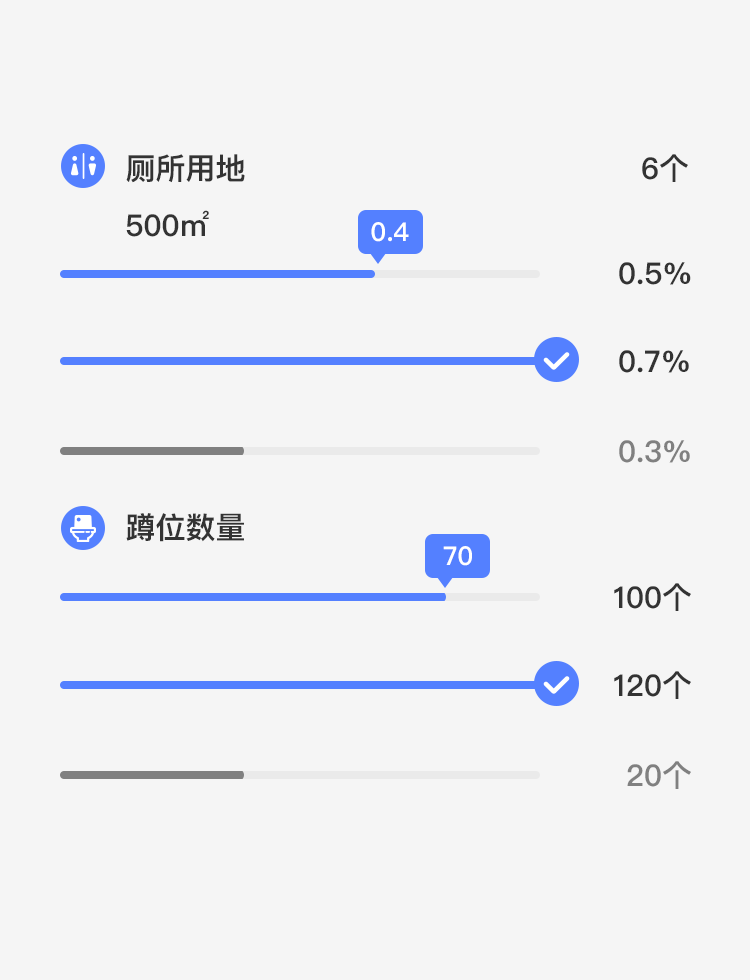
<style>
.page{position:relative;width:750px;height:980px;background:#f5f5f5}
.page>*{position:absolute;margin:0}
.t1{font:30px "PingFangSC-Semibold";color:#333333;text-transform:uppercase}
.t2{font:26px "PingFangSC-Semibold";color:#ffffff;text-transform:uppercase}
.t3{font:30px "PingFangSC-Semibold";color:#808080;text-transform:uppercase}
</style>
<div class="page">
<p class="t1" style="left:126px;top:154px;width:119px;height:29px">厕所用地</p>
<p class="t1" style="left:642px;top:154px;width:46px;height:28px">6个</p>
<p class="t1" style="left:126px;top:210px;width:83px;height:27px">500㎡</p>
<p class="t2" style="left:371px;top:222px;width:38px;height:20px">0.4</p>
<p class="t1" style="left:619px;top:262px;width:72px;height:23px">0.5%</p>
<p class="t1" style="left:619px;top:350px;width:70px;height:23px">0.7%</p>
<p class="t3" style="left:619px;top:440px;width:71px;height:23px">0.3%</p>
<p class="t1" style="left:126px;top:513px;width:118px;height:29px">蹲位数量</p>
<p class="t2" style="left:443px;top:546px;width:29px;height:20px">70</p>
<p class="t1" style="left:614px;top:583px;width:77px;height:28px">100个</p>
<p class="t1" style="left:614px;top:671px;width:77px;height:28px">120个</p>
<p class="t3" style="left:627px;top:761px;width:64px;height:28px">20个</p>
</div>
